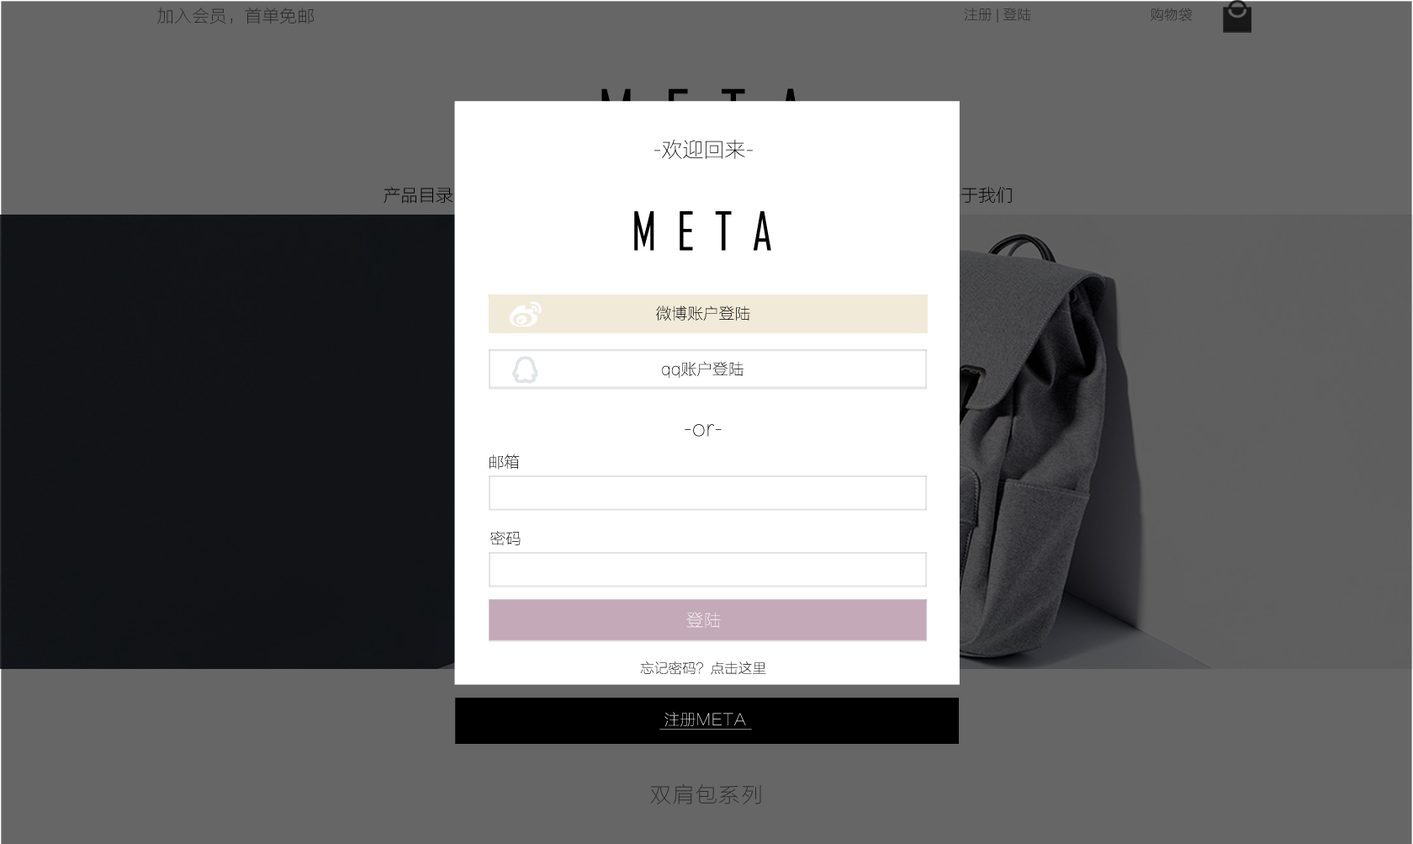
<style>
.page{position:relative;width:1413px;height:844px;background:#666666}
.page>*{position:absolute;margin:0}
.t1{font:17.5px "FZLTCXHJW--GB1-0";color:#292929}
.t2{font:14px "FZLTCXHJW--GB1-0";color:#292929}
.t3{font:14.2px "ArialMT";color:#292929}
.t4{font:21px "FZLTCXHJW--GB1-0";color:#000000}
.t5{font:50.9px "AgencyFB-Reg";color:#000000}
.t6{font:15.8px "FZLTCXHJW--GB1-0";color:#000000}
.t7{font:21px "FZLTCXHJW--GB1-0"}
.t8{font:15.8px "FZLTCXHJW--GB1-0"}
.t9{font:17.5px "FZLTCXHJW--GB1-0";color:#ffffff}
.t10{font:14px "FZLTCXHJW--GB1-0";color:#0f0f0f}
.t11{font:15.8px "FZLTCXHJW--GB1-0";color:#ffffff}
.t12{font:21.4px "FZLTCXHJW--GB1-0";letter-spacing:0.075em;color:#292929}
</style>
<div class="page">
<p class="t1" style="left:157px;top:8px;width:158px;height:16px">加入会员，首单免邮</p>
<p class="t2" style="left:964px;top:8px;width:228px;height:15px"><span class="t3"> </span>注册 | 登陆                           购物袋</p>
<p class="t4" style="left:654px;top:140px;width:99px;height:19px">-欢迎回来-</p>
<p class="t5" style="left:634px;top:211px;width:137px;height:40px">M  E  T  A</p>
<p class="t6" style="left:656px;top:305px;width:94px;height:16px">微博账户登陆</p>
<p class="t6" style="left:662px;top:361px;width:82px;height:17px">qq账户登陆</p>
<p class="t7" style="left:685px;top:424px;width:37px;height:13px">-or-</p>
<p class="t6" style="left:490px;top:454px;width:30px;height:15px">邮箱</p>
<p class="t8" style="left:490px;top:531px;width:31px;height:15px">密码</p>
<p class="t9" style="left:686px;top:612px;width:35px;height:16px">登陆</p>
<p class="t10" style="left:640px;top:661px;width:126px;height:14px">忘记密码？点击这里</p>
<p class="t11" style="left:665px;top:712px;width:81px;height:15px">注册META</p>
<p class="t12" style="left:650px;top:784px;width:111px;height:20px">双肩包系列</p>
</div>
